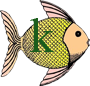
<style>
.page{position:relative;width:90px;height:86px;background:#ffffff}
.page>*{position:absolute;margin:0}
.t1{font:48px "TimesNewRomanPSMT";color:#1b5d1b}
</style>
<div class="page">
<p class="t1" style="left:30px;top:18px;width:24px;height:34px">k</p>
</div>
